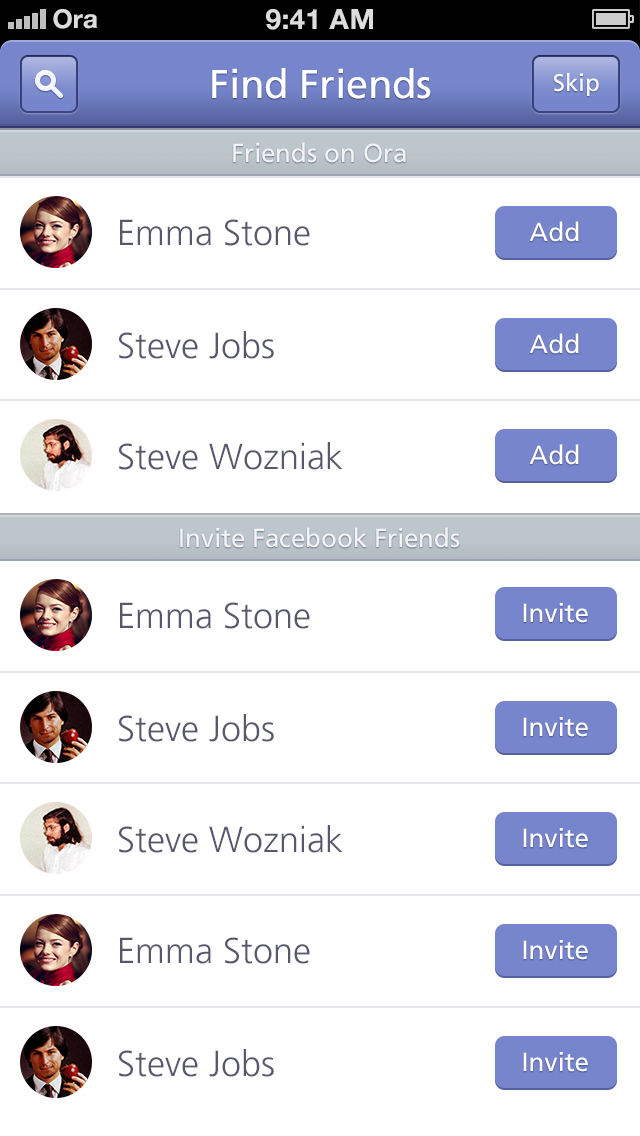
<style>
.page{position:relative;width:640px;height:1136px;background:#ffffff}
.page>*{position:absolute;margin:0}
.t1{font:40px "FrutigerLT-Roman";color:#ffffff}
.t2{font:24px "FrutigerLT-Roman";color:#f2f5ff}
.t3{font:26px "FrutigerLT-Roman";color:#ffffff}
.t4{font:36px "FrutigerLT-Light";color:#58586d}
</style>
<div class="page">
<p class="t1" style="left:212px;top:68px;width:219px;height:31px">Find Friends</p>
<p class="t2" style="left:554px;top:73px;width:45px;height:23px">Skip</p>
<p class="t3" style="left:233px;top:142px;width:173px;height:21px">Friends on Ora</p>
<p class="t4" style="left:120px;top:219px;width:190px;height:27px">Emma Stone</p>
<p class="t3" style="left:529px;top:221px;width:50px;height:21px">Add</p>
<p class="t4" style="left:119px;top:331px;width:155px;height:28px">Steve Jobs</p>
<p class="t3" style="left:529px;top:333px;width:50px;height:21px">Add</p>
<p class="t4" style="left:119px;top:442px;width:224px;height:28px">Steve Wozniak</p>
<p class="t3" style="left:529px;top:444px;width:50px;height:21px">Add</p>
<p class="t3" style="left:180px;top:527px;width:280px;height:21px">Invite Facebook Friends</p>
<p class="t4" style="left:120px;top:602px;width:190px;height:27px">Emma Stone</p>
<p class="t3" style="left:523px;top:603px;width:65px;height:20px">Invite</p>
<p class="t4" style="left:119px;top:714px;width:155px;height:28px">Steve Jobs</p>
<p class="t3" style="left:523px;top:717px;width:65px;height:20px">Invite</p>
<p class="t4" style="left:119px;top:825px;width:224px;height:28px">Steve Wozniak</p>
<p class="t3" style="left:523px;top:828px;width:65px;height:20px">Invite</p>
<p class="t4" style="left:120px;top:937px;width:190px;height:27px">Emma Stone</p>
<p class="t3" style="left:523px;top:940px;width:65px;height:20px">Invite</p>
<p class="t4" style="left:119px;top:1049px;width:155px;height:28px">Steve Jobs</p>
<p class="t3" style="left:523px;top:1052px;width:65px;height:20px">Invite</p>
</div>
